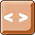
<style>
.page{position:relative;width:35px;height:35px;background:#e3ab86}
.page>*{position:absolute;margin:0}
.t1{font:24px "BebasNeue-Regular";color:#ffffff;font-weight:bold}
</style>
<div class="page">
<p class="t1" style="left:4px;top:13px;width:24px;height:9px">&lt; &gt;</p>
</div>
